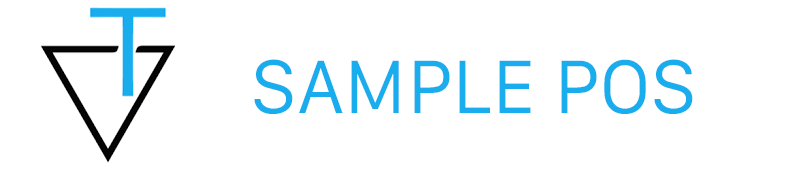
<style>
.page{position:relative;width:800px;height:173px;background:#ffffff}
.page>*{position:absolute;margin:0}
.t1{font:72px "Galvji";color:#1aadee}
</style>
<div class="page">
<p class="t1" style="left:254px;top:59px;width:439px;height:55px">SAMPLE POS</p>
</div>
